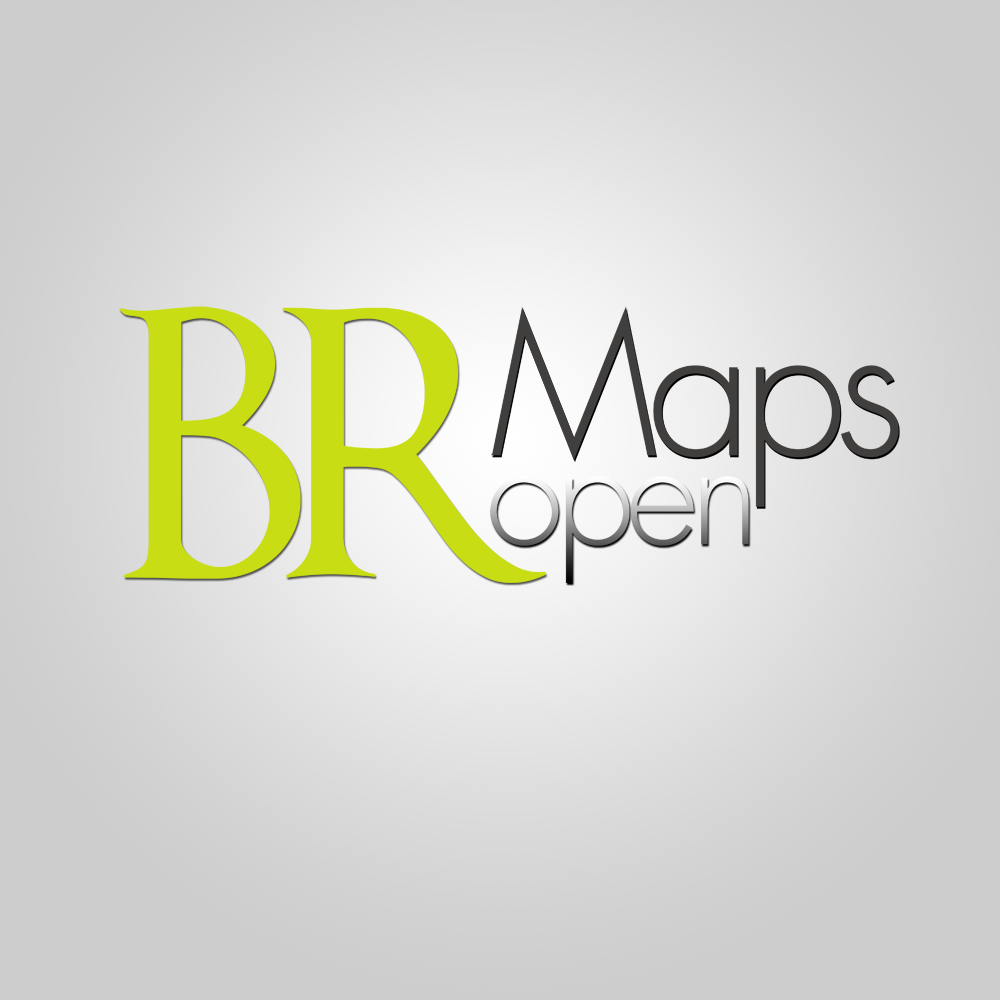
<style>
.page{position:relative;width:1000px;height:1000px}
.page>*{position:absolute;margin:0}
.t1{font:362.1px "OptimusPrinceps";letter-spacing:-0.095em;color:#c8dd14}
.t2{font:190.4px "FuturaStd-Light";letter-spacing:-0.055em;color:#403d3d}
.t3{font:143.8px "FuturaStd-Light";letter-spacing:-0.055em}
</style>
<div class="page">
<p class="t1" style="left:119px;top:306px;width:427px;height:277px">BR</p>
<p class="t2" style="left:491px;top:306px;width:408px;height:201px">Maps</p>
<p class="t3" style="left:490px;top:476px;width:259px;height:107px">open</p>
</div>
